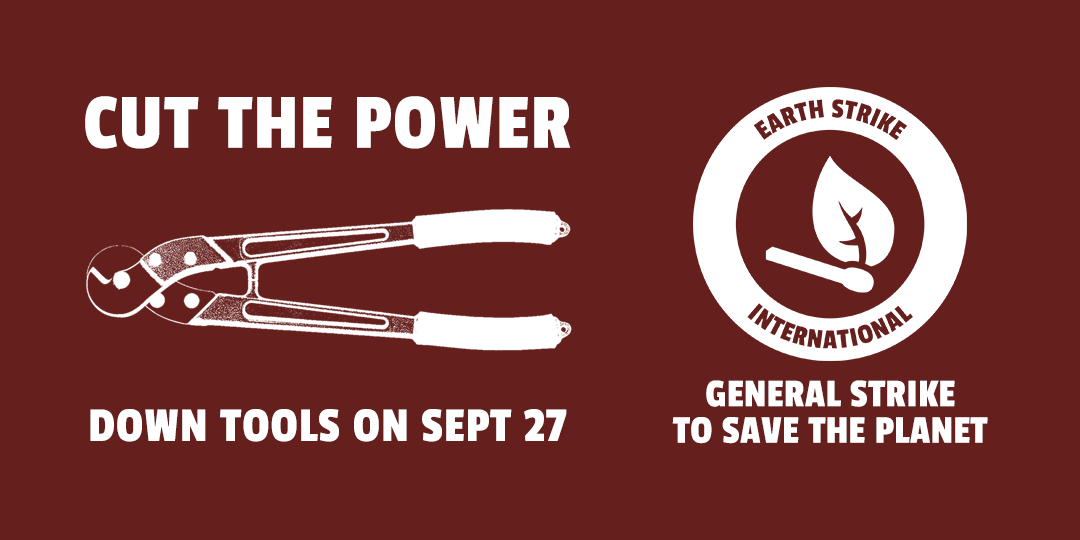
<style>
.page{position:relative;width:1080px;height:540px;background:#65201d}
.page>*{position:absolute;margin:0}
.t1{font:81.9px "PassionOne-Regular";letter-spacing:0.02em;color:#ffffff;text-transform:uppercase}
.t2{font:41px/36.6px "PassionOne-Regular";letter-spacing:0.01em;color:#ffffff}
.t3{font:50.9px "PassionOne-Regular";letter-spacing:0.02em;color:#ffffff;text-transform:uppercase}
</style>
<div class="page">
<p class="t1" style="left:85px;top:96px;width:486px;height:53px">CUT THE POWER</p>
<p class="t2" style="left:672px;top:380px;width:316px;height:64px;text-align:center">GENERAL STRIKE<br>TO SAVE THE PLANET</p>
<p class="t3" style="left:90px;top:409px;width:477px;height:33px">down tools on sept 27</p>
</div>
